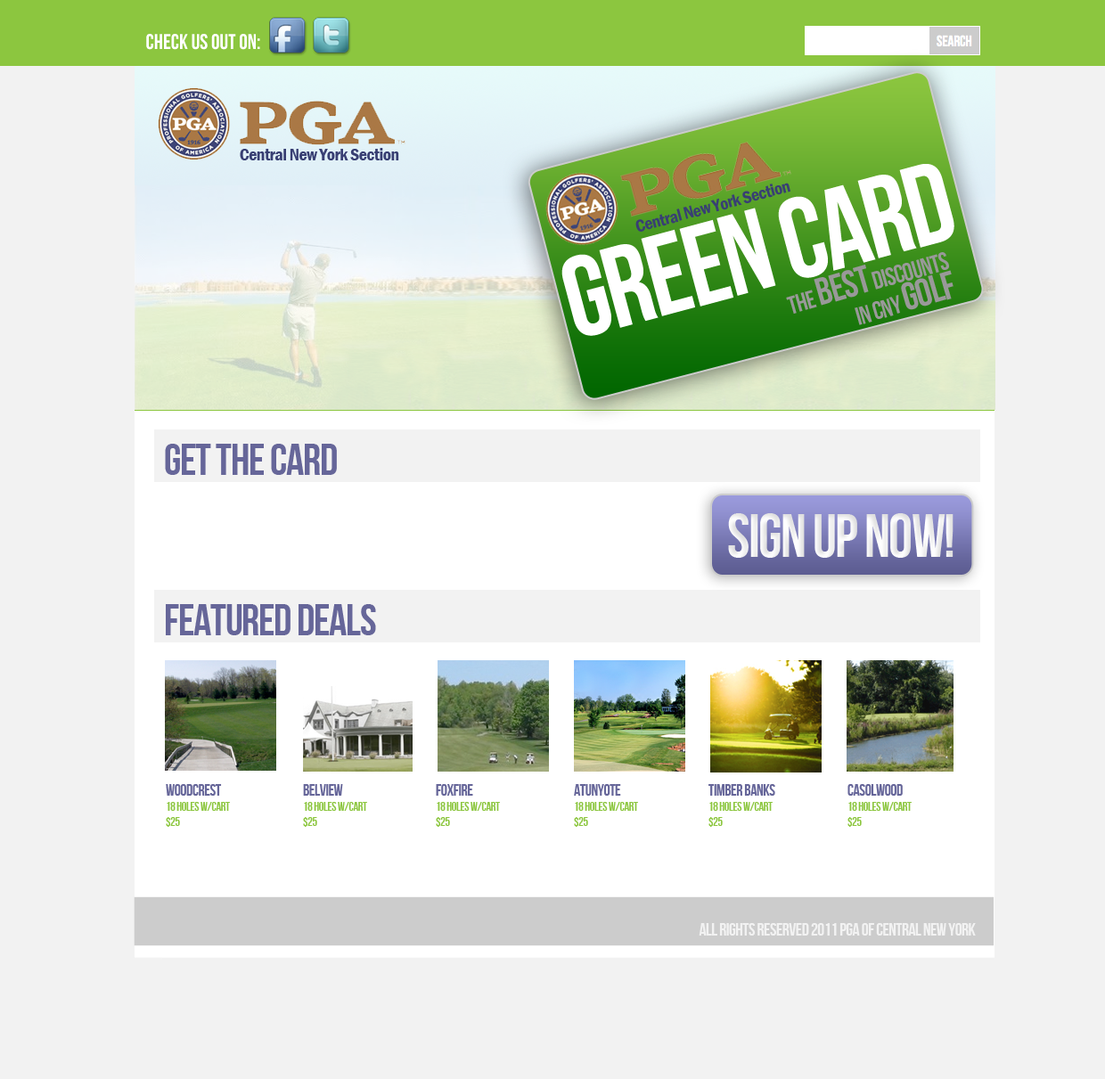
<style>
.page{position:relative;width:1105px;height:1079px;background:#f2f2f2}
.page>*{position:absolute;margin:0}
.t1{font:17.8px "FranklinGothic-DemiCond";letter-spacing:-0.025em;color:#383f73}
.t2{font:114.4px "BebasNeue";letter-spacing:-0.025em;color:#ffffff}
.t3{font:25.3px/29.1px "BebasNeue";letter-spacing:-0.025em;color:#999999}
.t4{font:38.5px/29.1px "BebasNeue";letter-spacing:-0.025em;color:#999999}
.t5{font:39.2px/29.1px "BebasNeue";letter-spacing:-0.025em;color:#999999}
.t6{font:44.6px "BebasNeue";letter-spacing:-0.025em;color:#666699}
.t7{font:60.6px "BebasNeue";letter-spacing:-0.025em;color:#ffffff}
.t8{font:12.5px/15.2px "BebasNeue";letter-spacing:-0.025em;color:#8cc63f}
.t9{font:16px/15.2px "BebasNeue";letter-spacing:-0.025em;color:#666699}
.t10{font:16px/20.5px "BebasNeue";letter-spacing:-0.025em;color:#666699}
.t11{font:17.8px "BebasNeue";letter-spacing:-0.025em;color:#f2f2f2}
</style>
<div class="page">
<p class="t1" style="left:240px;top:148px;width:159px;height:12px">Central New York Section</p>
<p class="t2" style="left:561px;top:164px;width:393px;height:172px;rotate:-15deg">green card</p>
<p class="t1" style="left:635px;top:183px;width:155px;height:49px;rotate:-15deg">Central New York Section</p>
<p class="t3" style="left:786px;top:252px;width:167px;height:73px;text-align:right;rotate:-16deg">the <span class="t4">BEST</span> discounts<br>in CNY <span class="t5">GOLF</span></p>
<p class="t6" style="left:165px;top:444px;width:172px;height:31px">get the card</p>
<p class="t7" style="left:728px;top:513px;width:225px;height:45px">sign up now!</p>
<p class="t6" style="left:166px;top:604px;width:210px;height:31px">featured deals</p>
<p class="t8" style="left:166px;top:784px;width:64px;height:43px"><span class="t9">woodcrest <br></span>18 holes w/cart<br>$25</p>
<p class="t8" style="left:303px;top:784px;width:64px;height:43px"><span class="t10">belview<br></span>18 holes w/cart<br>$25</p>
<p class="t8" style="left:436px;top:784px;width:64px;height:43px"><span class="t10">foxfire<br></span>18 holes w/cart<br>$25</p>
<p class="t8" style="left:574px;top:784px;width:64px;height:43px"><span class="t10">atunyote<br></span>18 holes w/cart<br>$25</p>
<p class="t8" style="left:708px;top:784px;width:67px;height:43px"><span class="t10">timber banks<br></span>18 holes w/cart<br>$25</p>
<p class="t8" style="left:847px;top:784px;width:65px;height:43px"><span class="t10">casolwood<br></span>18 holes w/cart<br>$25</p>
<p class="t11" style="left:699px;top:923px;width:277px;height:13px">all rights reserved 2011 pga of central new York</p>
</div>
